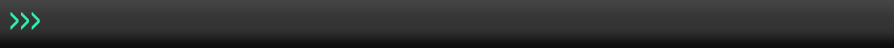
<style>
.page{position:relative;width:894px;height:48px}
.page>*{position:absolute;margin:0}
.t1{font:32.8px "BookAntiqua";letter-spacing:0.06em;color:#2eefad;font-weight:bold;scale:0.47 1}
</style>
<div class="page">
<p class="t1" style="left:10px;top:12px;width:30px;height:18px">&gt;&gt;&gt;</p>
</div>
